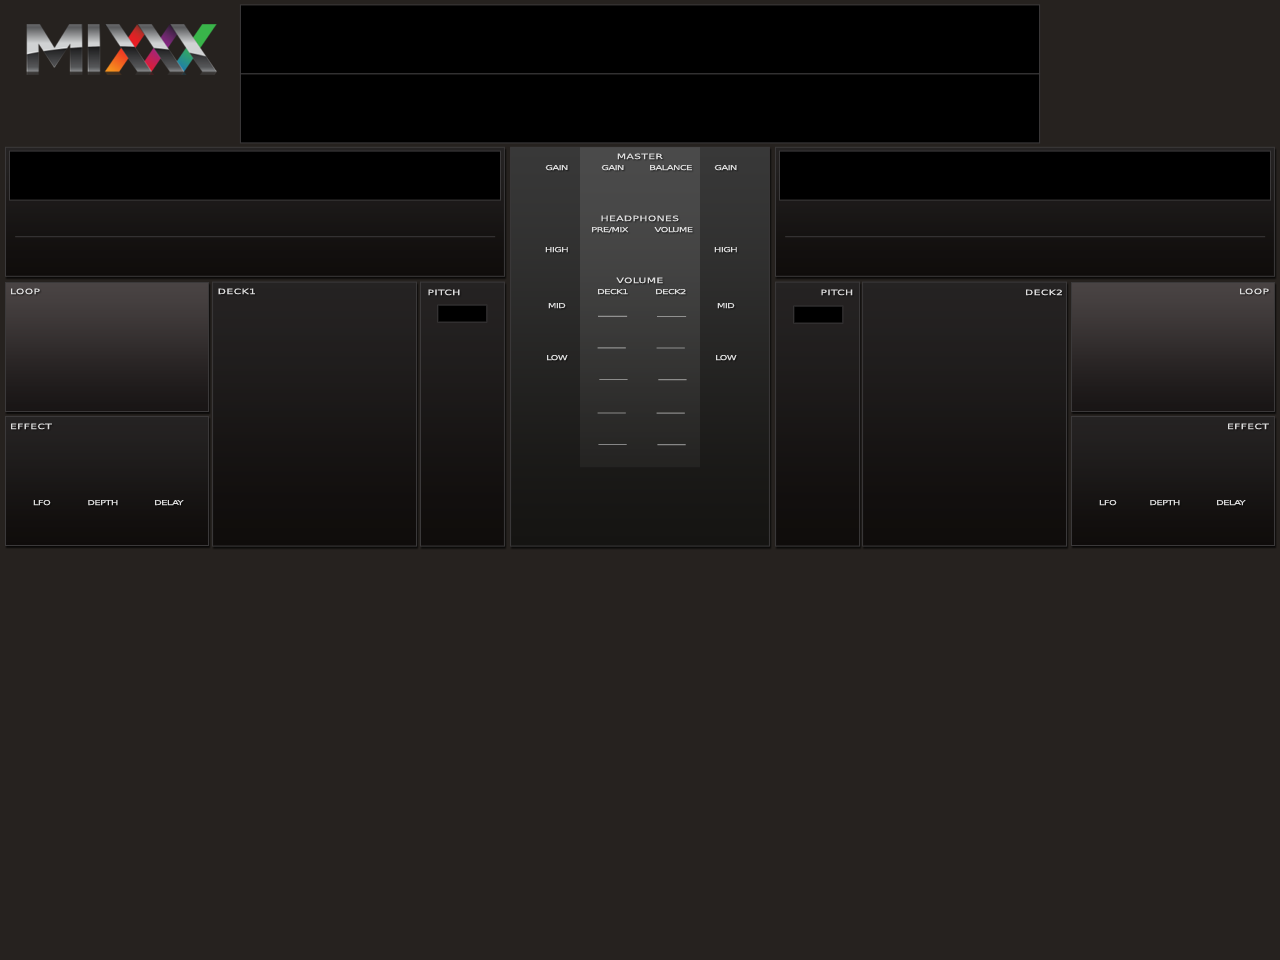
<style>
.page{position:relative;width:1280px;height:960px;background:#26221f}
.page>*{position:absolute;margin:0}
.t1{font:7.2px "DejaVuSansCondensed";color:#dddddd;font-weight:bold;scale:1.67 1}
.t2{font:6.6px "DejaVuSansCondensed";letter-spacing:-0.08em;color:#dddddd;font-weight:bold;scale:1.67 1}
.t3{font:7.2px "DejaVuSansCondensed";color:#dddddd;font-weight:bold;scale:1.68 1}
</style>
<div class="page">
<p class="t1" style="left:617px;top:153px;width:46px;height:7px">MASTER</p>
<p class="t2" style="left:545px;top:165px;width:23px;height:6px">GAIN</p>
<p class="t2" style="left:601px;top:165px;width:23px;height:6px">GAIN</p>
<p class="t2" style="left:650px;top:165px;width:42px;height:6px">BALANCE</p>
<p class="t2" style="left:714px;top:165px;width:23px;height:6px">GAIN</p>
<p class="t1" style="left:601px;top:215px;width:78px;height:7px">HEADPHONES</p>
<p class="t2" style="left:592px;top:227px;width:37px;height:6px">PRE/MIX</p>
<p class="t2" style="left:654px;top:227px;width:39px;height:6px">VOLUME</p>
<p class="t2" style="left:545px;top:247px;width:23px;height:6px">HIGH</p>
<p class="t2" style="left:714px;top:247px;width:23px;height:6px">HIGH</p>
<p class="t1" style="left:616px;top:277px;width:47px;height:7px">VOLUME</p>
<p class="t1" style="left:11px;top:288px;width:29px;height:7px">LOOP</p>
<p class="t3" style="left:218px;top:288px;width:37px;height:7px">DECK1</p>
<p class="t3" style="left:428px;top:289px;width:32px;height:7px">PITCH</p>
<p class="t2" style="left:598px;top:289px;width:30px;height:6px">DECK1</p>
<p class="t2" style="left:656px;top:289px;width:30px;height:6px">DECK2</p>
<p class="t1" style="left:821px;top:289px;width:32px;height:7px">PITCH</p>
<p class="t1" style="left:1026px;top:289px;width:36px;height:7px">DECK2</p>
<p class="t1" style="left:1240px;top:288px;width:29px;height:7px">LOOP</p>
<p class="t2" style="left:548px;top:303px;width:18px;height:6px">MID</p>
<p class="t2" style="left:717px;top:303px;width:18px;height:6px">MID</p>
<p class="t2" style="left:547px;top:355px;width:21px;height:6px">LOW</p>
<p class="t2" style="left:716px;top:355px;width:21px;height:6px">LOW</p>
<p class="t1" style="left:11px;top:423px;width:41px;height:7px">EFFECT</p>
<p class="t1" style="left:1228px;top:423px;width:41px;height:7px">EFFECT</p>
<p class="t2" style="left:33px;top:500px;width:18px;height:6px">LFO</p>
<p class="t2" style="left:88px;top:500px;width:30px;height:6px">DEPTH</p>
<p class="t2" style="left:155px;top:500px;width:29px;height:6px">DELAY</p>
<p class="t2" style="left:1099px;top:500px;width:18px;height:6px">LFO</p>
<p class="t2" style="left:1150px;top:500px;width:30px;height:6px">DEPTH</p>
<p class="t2" style="left:1217px;top:500px;width:29px;height:6px">DELAY</p>
</div>
